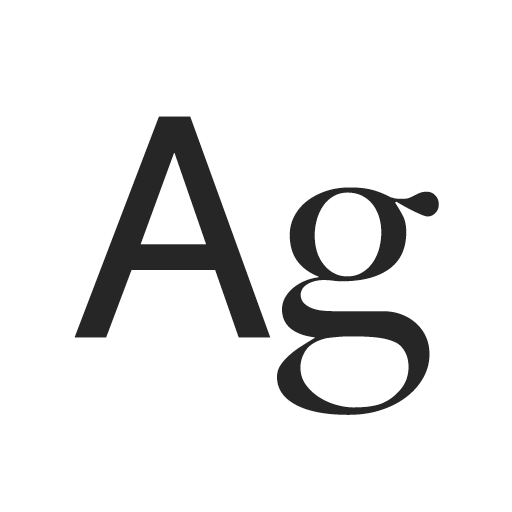
<style>
.page{position:relative;width:512px;height:512px;background:#ffffff}
.page>*{position:absolute;margin:0}
.t1{font:310px "AkzidenzGrotesk-Roman";color:#262626}
.t2{font:310px "BigCaslon-Medium";color:#262626}
</style>
<div class="page">
<p class="t1" style="left:74px;top:116px;width:365px;height:299px">A<span class="t2">g</span></p>
</div>
